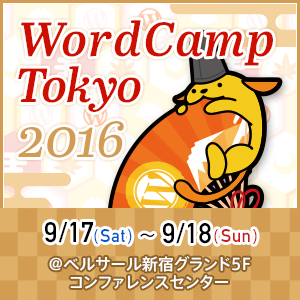
<style>
.page{position:relative;width:300px;height:300px}
.page>*{position:absolute;margin:0}
.t1{font:48px/48px "AbrilText-SemiBoldItalic";color:#ce0f00}
.t2{font:48px/43.2px "AbrilText-SemiBoldItalic";letter-spacing:0.05em;color:#ce0f00}
.t3{font:48px/46.1px "AbrilText-SemiBoldItalic";letter-spacing:0.05em;color:#ce0f00}
.t4{font:54.7px "AbrilText-Italic";color:#d39c53}
.t5{font:28px "DINAlternate-Bold";letter-spacing:0.025em;color:#000000}
.t6{font:15px "AxisStd-Regular";letter-spacing:0.025em;color:#0058d0}
.t7{font:18px "DINAlternate-Bold";letter-spacing:0.025em;color:#0058d0}
.t8{font:17.6px "AxisStd-Regular";letter-spacing:0.025em;color:#000000}
.t9{font:15px "AxisStd-Regular";letter-spacing:0.025em;color:#c81b1b}
.t10{font:18px "DINAlternate-Bold";letter-spacing:0.025em;color:#c81b1b}
.t11{font:16px/18px "AxisStd-Medium";color:#ffffff}
</style>
<div class="page">
<p class="t1" style="left:18px;top:20px;width:255px;height:92px"><span class="t2">Word</span><span class="t3">Camp<br></span>Tokyo</p>
<p class="t4" style="left:18px;top:121px;width:106px;height:37px">2016</p>
<p class="t5" style="left:45px;top:222px;width:212px;height:22px">9/17<span class="t6">(</span><span class="t7">Sat</span><span class="t6">)</span><span class="t8">〜</span>9/18<span class="t9">(</span><span class="t10">Sun</span><span class="t9">)</span></p>
<p class="t11" style="left:49px;top:256px;width:201px;height:33px;text-align:center">@ベルサール新宿グランド5F<br>コンファレンスセンター</p>
</div>
